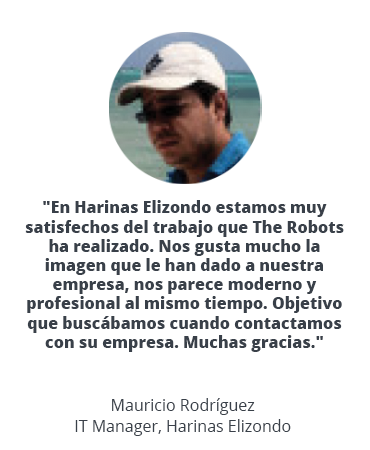
<style>
.page{position:relative;width:370px;height:450px;background:#ffffff}
.page>*{position:absolute;margin:0}
.t1{font:16px "OpenSans-Extrabold";color:#394049}
.t2{font:16px "OpenSans";color:#394049}
</style>
<div class="page">
<p class="t1" style="left:25px;top:200px;width:319px;height:152px;text-align:center">"En Harinas Elizondo estamos muy satisfechos del trabajo que The Robots ha realizado. Nos gusta mucho la imagen que le han dado a nuestra empresa, nos parece moderno y profesional al mismo tiempo. Objetivo que buscábamos cuando contactamos con su empresa. Muchas gracias."</p>
<p class="t2" style="left:112px;top:398px;width:143px;height:17px">Mauricio Rodríguez</p>
<p class="t2" style="left:75px;top:419px;width:216px;height:17px">IT Manager, Harinas Elizondo</p>
</div>
